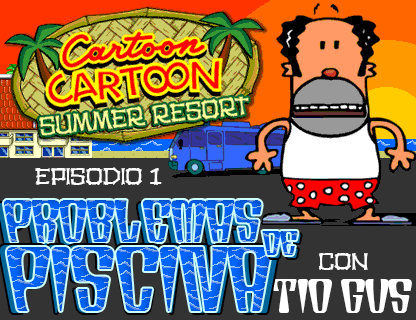
<style>
.page{position:relative;width:416px;height:320px;background:#333333}
.page>*{position:absolute;margin:0}
.t1{font:24.3px "TikiHut";color:#ffffff}
.t2{font:59.9px "TikiWood";letter-spacing:0.04em;color:#005de4;scale:0.93 1}
.t3{font:34.9px "TikiWood";letter-spacing:0.04em;color:#0059dc}
.t4{font:96.8px "TikiWood";letter-spacing:0.06em;scale:0.94 1}
.t5{font:91.6px "TikiWood";letter-spacing:0.06em;scale:0.94 1}
.t6{font:48.2px "TikiWood";color:#ffffff}
</style>
<div class="page">
<p class="t1" style="left:35px;top:167px;width:127px;height:18px">episodio 1</p>
<p class="t2" style="left:4px;top:200px;width:258px;height:42px">problemas</p>
<p class="t3" style="left:262px;top:231px;width:36px;height:24px">de</p>
<p class="t4" style="left:0px;top:245px;width:279px;height:68px">piscina</p>
<p class="t5" style="left:6px;top:247px;width:266px;height:64px">piscina</p>
<p class="t1" style="left:318px;top:253px;width:50px;height:17px">con</p>
<p class="t6" style="left:271px;top:279px;width:141px;height:34px">tio gus</p>
</div>
